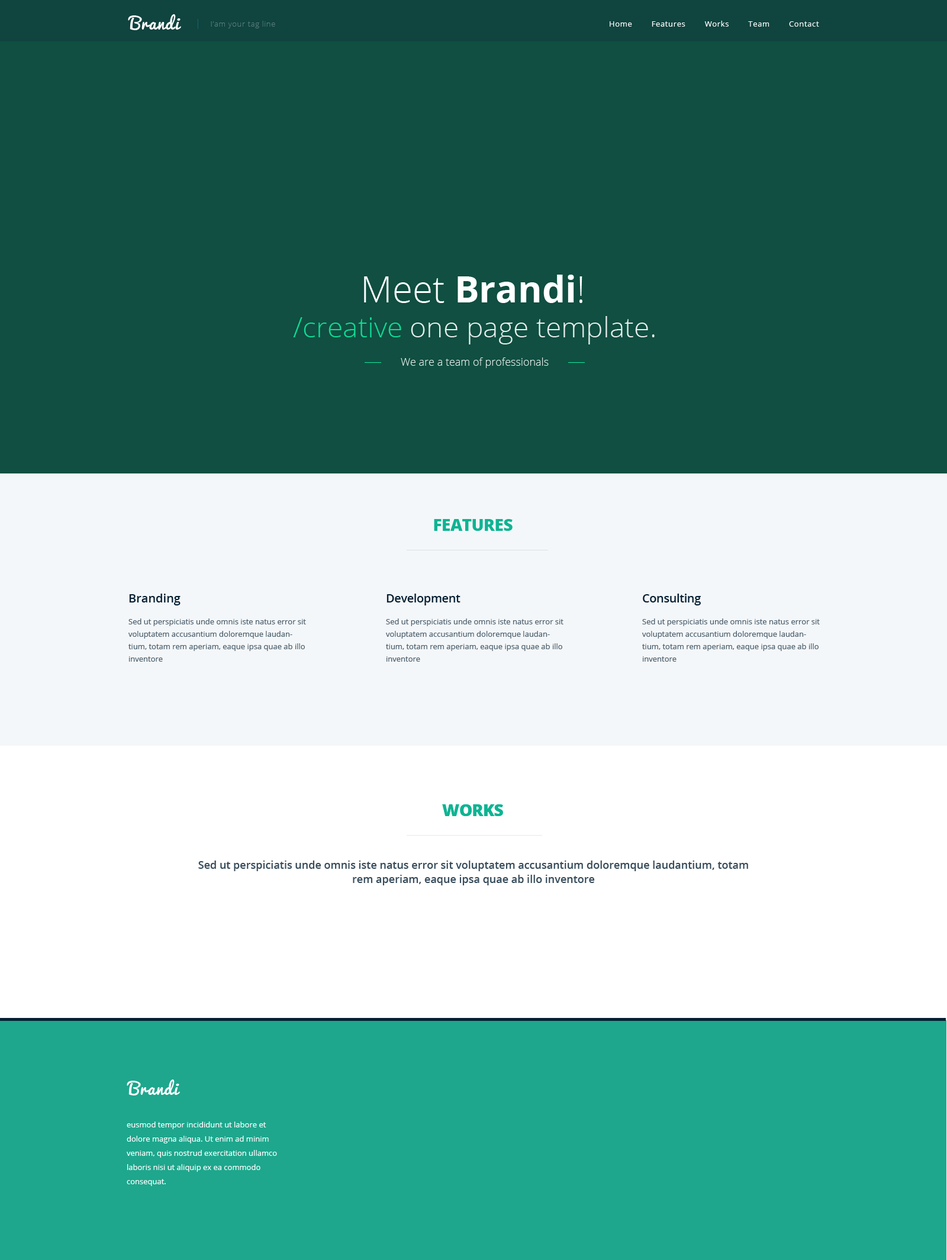
<style>
.page{position:relative;width:947px;height:1260px;background:#104f41}
.page>*{position:absolute;margin:0}
.t1{font:16.6px "Pacifico-Regular";letter-spacing:0.05em;color:#ffffff}
.t2{font:7.7px "OpenSans-Light";letter-spacing:0.05em;color:#587c79}
.t3{font:9.5px "OpenSans-Light";letter-spacing:0.05em;color:#587c79}
.t4{font:7.7px "OpenSans";letter-spacing:0.05em;color:#ffffff}
.t5{font:36.7px "OpenSans-Bold";color:#ffffff}
.t6{font:36.7px "OpenSans-Light";color:#ffffff}
.t7{font:28.4px "OpenSans-Light";color:#ffffff}
.t8{font:28.4px "OpenSans-Light";color:#0feb9e}
.t9{font:10.6px "OpenSans-Light";color:#ffffff}
.t10{font:16.6px "OpenSans-Extrabold";letter-spacing:-0.02em;color:#0eb493;text-transform:uppercase}
.t11{font:11.8px "OpenSans-Semibold";color:#062033}
.t12{font:11.8px "OpenSans-Semibold";letter-spacing:-0.02em;color:#062033}
.t13{font:7.7px/12.4px "OpenSans";color:#4d606e}
.t14{font:10.6px/14.2px "OpenSans-Semibold";color:#384d5c}
.t15{font:7.7px/14.2px "OpenSans";color:#ffffff}
</style>
<div class="page">
<p class="t1" style="left:128px;top:14px;width:53px;height:16px">Brandi</p>
<p class="t2" style="left:197px;top:19px;width:78px;height:10px"><span class="t3">|</span>    I’am your tag line</p>
<p class="t4" style="left:609px;top:21px;width:210px;height:6px">Home        Features        Works        Team        Contact</p>
<p class="t5" style="left:364px;top:275px;width:218px;height:28px"><span class="t6">Meet </span>Brandi<span class="t6">!</span></p>
<p class="t7" style="left:293px;top:316px;width:361px;height:28px;opacity:0.9"><span class="t8">/creative</span> one page template.</p>
<p class="t9" style="left:401px;top:357px;width:147px;height:11px;opacity:0.9">We are a team of professionals</p>
<p class="t10" style="left:434px;top:519px;width:78px;height:12px">Features</p>
<p class="t11" style="left:129px;top:593px;width:51px;height:12px">Branding</p>
<p class="t12" style="left:386px;top:593px;width:74px;height:12px">Development</p>
<p class="t12" style="left:643px;top:593px;width:58px;height:12px">Consulting</p>
<p class="t13" style="left:128px;top:618px;width:178px;height:43px">Sed ut perspiciatis unde omnis iste natus error sit voluptatem accusantium doloremque laudantium, totam rem aperiam, eaque ipsa quae ab illo inventore</p>
<p class="t13" style="left:386px;top:618px;width:177px;height:43px">Sed ut perspiciatis unde omnis iste natus error sit voluptatem accusantium doloremque laudantium, totam rem aperiam, eaque ipsa quae ab illo inventore</p>
<p class="t13" style="left:642px;top:618px;width:177px;height:43px">Sed ut perspiciatis unde omnis iste natus error sit voluptatem accusantium doloremque laudantium, totam rem aperiam, eaque ipsa quae ab illo inventore</p>
<p class="t10" style="left:442px;top:804px;width:61px;height:12px">Works</p>
<p class="t10" style="left:442px;top:804px;width:61px;height:12px">Works</p>
<p class="t14" style="left:198px;top:860px;width:550px;height:25px;text-align:center">Sed ut perspiciatis unde omnis iste natus error sit voluptatem accusantium doloremque laudantium, totam rem aperiam, eaque ipsa quae ab illo inventore</p>
<p class="t1" style="left:127px;top:1079px;width:53px;height:16px">Brandi</p>
<p class="t15" style="left:127px;top:1121px;width:150px;height:65px">eusmod tempor incididunt ut labore et dolore magna aliqua. Ut enim ad minim veniam, quis nostrud exercitation ullamco laboris nisi ut aliquip ex ea commodo <br>consequat.</p>
</div>
